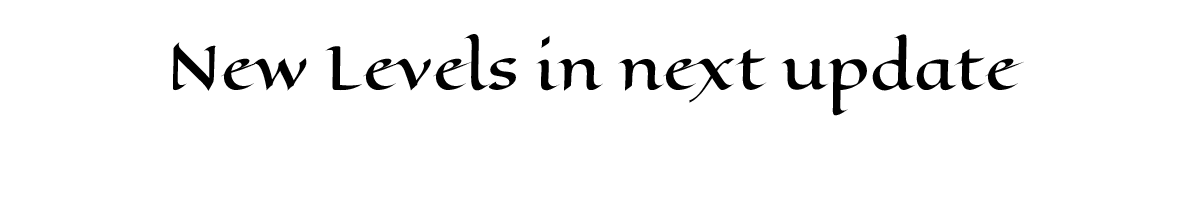
<style>
.page{position:relative;width:1179px;height:212px;background:#ffffff}
.page>*{position:absolute;margin:0}
.t1{font:58.3px "EagleLake-Regular";color:#000000}
</style>
<div class="page">
<p class="t1" style="left:173px;top:34px;width:851px;height:82px">New Levels in next update</p>
</div>
